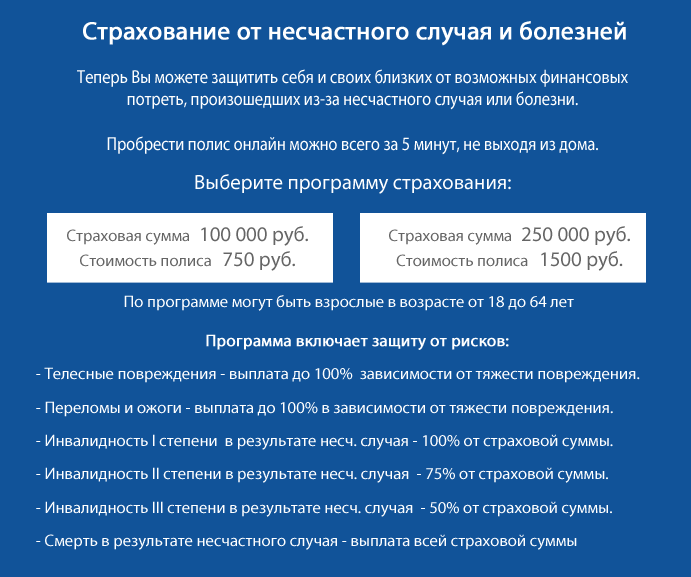
<style>
.page{position:relative;width:691px;height:577px;background:#115399}
.page>*{position:absolute;margin:0}
.t1{font:25px "MyriadPro-Regular";color:#ffffff;font-weight:bold}
.t2{font:18.7px "MyriadPro-Regular";color:#ffffff;scale:0.87 1}
.t3{font:20.8px "MyriadPro-Regular";color:#ffffff}
.t4{font:16.7px "MyriadPro-Regular";color:#656565}
.t5{font:20.8px "MyriadPro-Regular";color:#656565}
.t6{font:16.7px "MyriadPro-Regular";color:#ffffff}
.t7{font:16.7px/33.3px "MyriadPro-Regular";color:#ffffff}
.t8{font:16.7px/33.3px "MyriadPro-Regular";color:#ffffff;font-weight:bold}
</style>
<div class="page">
<p class="t1" style="left:83px;top:21px;width:543px;height:25px">Страхование от несчастного случая и болезней</p>
<p class="t2" style="left:77px;top:69px;width:551px;height:86px;text-align:center">Теперь Вы можете защитить себя и своих близких от возможных финансовых потреть, произошедших из-за несчастного случая или болезни. <br><br>Пробрести полис онлайн можно всего за 5 минут, не выходя из дома.</p>
<p class="t3" style="left:195px;top:174px;width:316px;height:20px">Выберите программу страхования:</p>
<p class="t4" style="left:67px;top:226px;width:241px;height:45px;text-align:center">Страховая сумма<span class="t5">  100 000 руб.<br></span>Стоимость полиса   <span class="t5">750 руб.</span></p>
<p class="t4" style="left:389px;top:226px;width:241px;height:45px;text-align:center">Страховая сумма<span class="t5">  250 000 руб.<br></span>Стоимость полиса   <span class="t5">1500 руб.</span></p>
<p class="t6" style="left:124px;top:295px;width:450px;height:16px">По программе могут быть взрослые в возрасте от 18 до 64 лет</p>
<p class="t7" style="left:36px;top:334px;width:604px;height:216px;text-align:center"><span class="t8">Программа включает защиту от рисков:</span><br>- Телесные повреждения - выплата до 100%  зависимости от тяжести повреждения. <br>- Переломы и ожоги - выплата до 100% в зависимости от тяжести повреждения.<br>- Инвалидность I степени  в результате несч. случая - 100% от страховой суммы. <br>- Инвалидность II степени в результате несч. случая  - 75% от страховой суммы. <br>- Инвалидность III степени в результате несч. случая  - 50% от страховой суммы.<br>- Смерть в результате несчастного случая - выплата всей страховой суммы</p>
</div>
